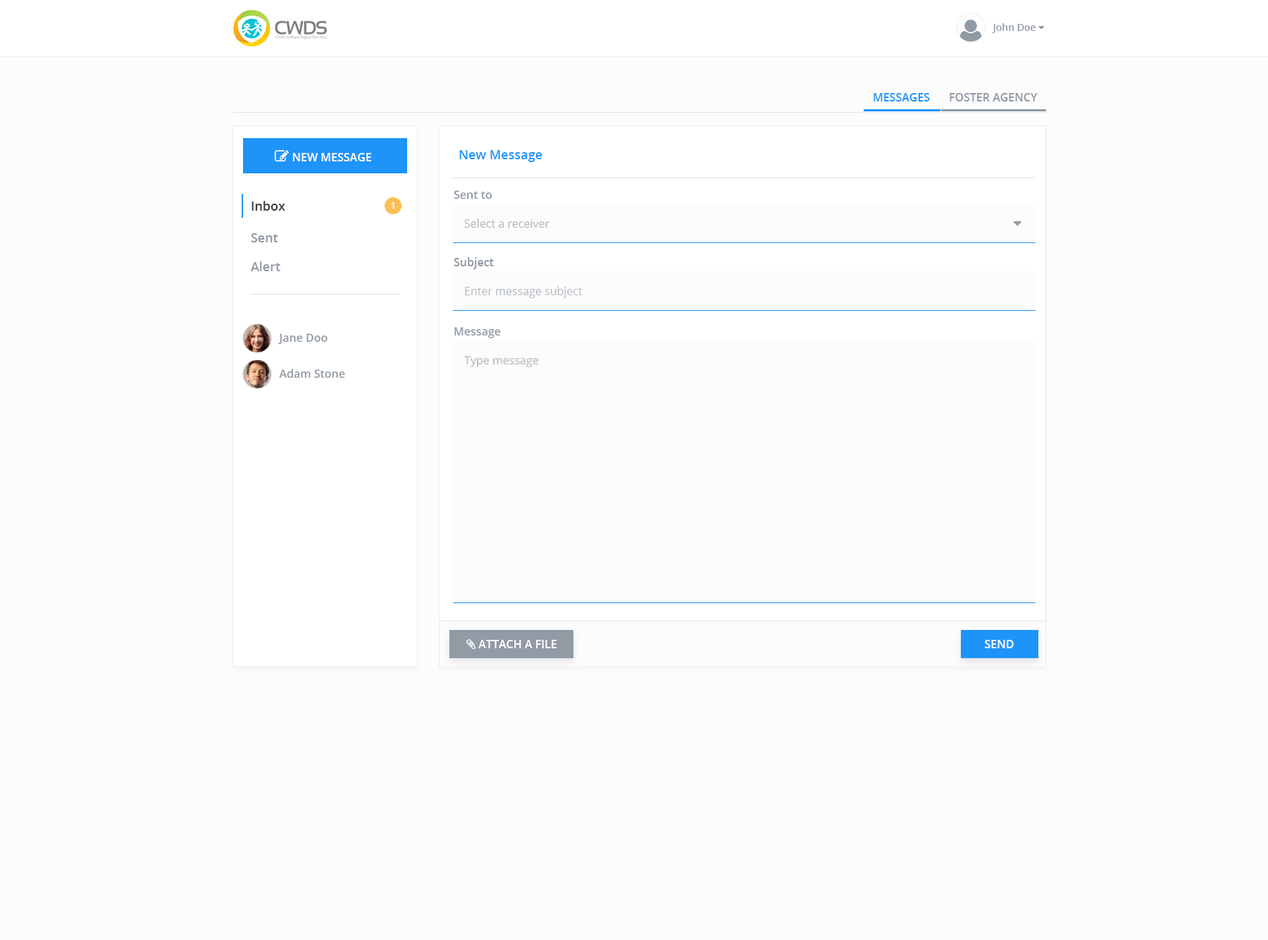
<style>
.page{position:relative;width:1268px;height:940px;background:#fcfcfc}
.page>*{position:absolute;margin:0}
.t1{font:11.3px "OpenSans-Semibold";color:#1e94f8;text-transform:uppercase}
.t2{font:11.3px "OpenSans-Semibold";color:#919aa5;text-transform:uppercase}
.t3{font:12.7px "OpenSans-Semibold";color:#1e94f8}
.t4{font:11.3px "OpenSans-Semibold";color:#919aa5}
.t5{font:12.7px "OpenSans-Semibold";color:#393d41}
.t6{font:9.9px "OpenSans-Semibold";color:#ffffff}
.t7{font:11.3px "OpenSans";color:#b5bac1}
.t8{font:12.7px "OpenSans-Semibold";color:#919aa5}
.t9{font:11.3px "OpenSans-Semibold";color:#ffffff;text-transform:uppercase}
</style>
<div class="page">
<p class="t1" style="left:874px;top:93px;width:56px;height:8px">Messages</p>
<p class="t2" style="left:950px;top:93px;width:88px;height:8px">foster agency</p>
<p class="t3" style="left:459px;top:150px;width:84px;height:12px">New Message</p>
<p class="t4" style="left:454px;top:190px;width:39px;height:9px">Sent to</p>
<p class="t5" style="left:252px;top:201px;width:33px;height:10px">Inbox</p>
<p class="t6" style="left:391px;top:202px;width:4px;height:7px">1</p>
<p class="t7" style="left:464px;top:218px;width:86px;height:10px">Select a receiver</p>
<p class="t8" style="left:251px;top:233px;width:27px;height:9px">Sent</p>
<p class="t4" style="left:454px;top:257px;width:40px;height:12px">Subject</p>
<p class="t8" style="left:251px;top:261px;width:29px;height:10px">Alert</p>
<p class="t7" style="left:465px;top:286px;width:118px;height:12px">Enter message subject</p>
<p class="t4" style="left:455px;top:327px;width:46px;height:11px">Message</p>
<p class="t4" style="left:278px;top:333px;width:50px;height:12px">Jane Doo</p>
<p class="t7" style="left:464px;top:356px;width:75px;height:11px">Type message</p>
<p class="t4" style="left:279px;top:369px;width:66px;height:9px">Adam Stone</p>
<p class="t9" style="left:985px;top:640px;width:29px;height:8px">Send</p>
</div>
